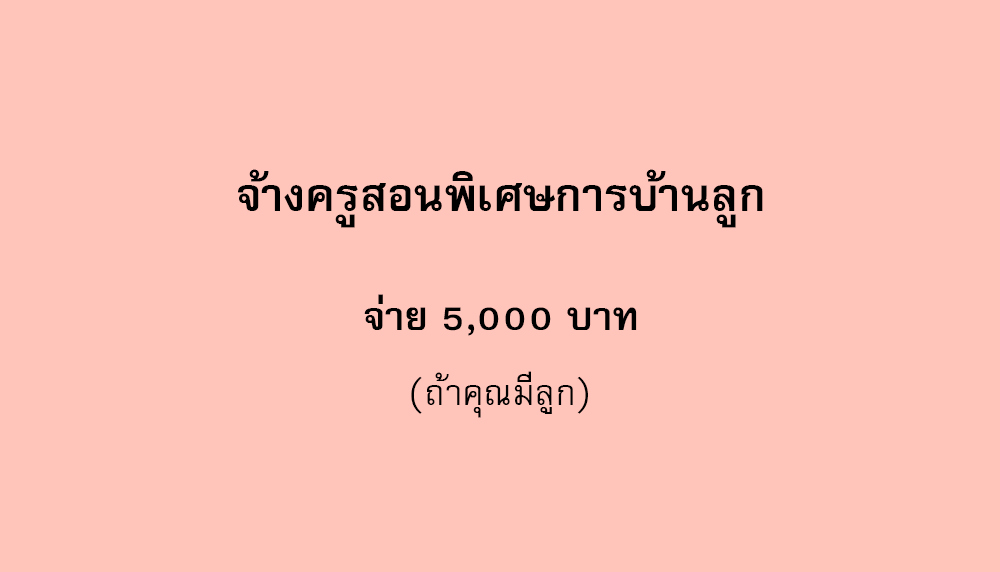
<style>
.page{position:relative;width:1000px;height:572px;background:#ffc4ba}
.page>*{position:absolute;margin:0}
.t1{font:64px "FreesiaUPCBold";color:#000000}
.t2{font:56px "FreesiaUPCBold";color:#000000}
.t3{font:50px "FreesiaUPC";color:#000000}
</style>
<div class="page">
<p class="t1" style="left:238px;top:169px;width:525px;height:59px">จ้างครูสอนพิเศษการบ้านลูก</p>
<p class="t2" style="left:364px;top:294px;width:273px;height:42px">จ่าย 5,000 บาท</p>
<p class="t3" style="left:411px;top:371px;width:177px;height:47px">(ถ้าคุณมีลูก)</p>
</div>
